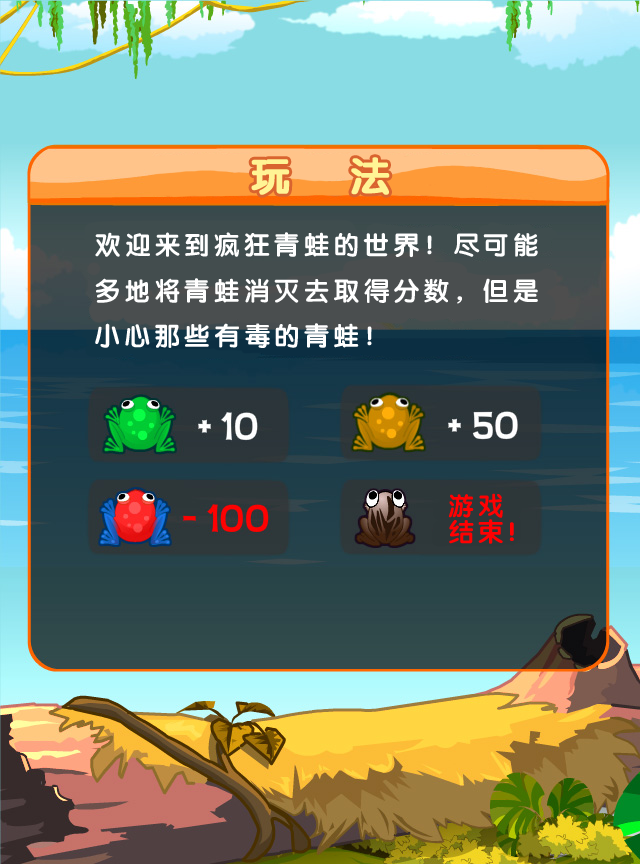
<style>
.page{position:relative;width:640px;height:864px}
.page>*{position:absolute;margin:0}
.t1{font:40px "JCuYuan";letter-spacing:0.3em;color:#fff495;font-weight:bold}
.t2{font:26px "JCuYuan";letter-spacing:0.15em;color:#ffffff}
.t3{font:26px/26px "JCuYuan";letter-spacing:0.15em;color:#ff0102}
</style>
<div class="page">
<p class="t1" style="left:251px;top:157px;width:139px;height:38px">玩  法</p>
<p class="t2" style="left:95px;top:232px;width:443px;height:116px">欢迎来到疯狂青蛙的世界！尽可能<br>多地将青蛙消灭去取得分数，但是<br>小心那些有毒的青蛙！</p>
<p class="t3" style="left:448px;top:493px;width:66px;height:51px">游戏<br>结束!</p>
</div>
